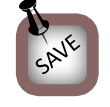
<style>
.page{position:relative;width:110px;height:107px;background:#ffffff}
.page>*{position:absolute;margin:0}
.t1{font:24px "Calibri";color:#000000}
</style>
<div class="page">
<p class="t1" style="left:35px;top:34px;width:46px;height:40px;rotate:-38deg">SAVE</p>
</div>
